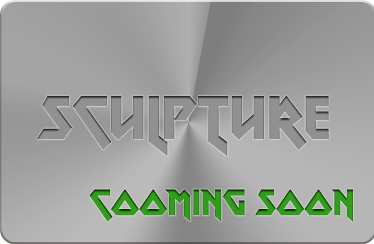
<style>
.page{position:relative;width:374px;height:244px}
.page>*{position:absolute;margin:0}
.t1{font:61.1px "MetalLord-Regular";color:#919191;text-transform:uppercase}
.t2{font:36.7px "MetalLord-Regular";color:#329d1d;text-transform:uppercase}
.t3{font:61.1px "MetalLord-Regular";color:#329d1d;text-transform:uppercase}
</style>
<div class="page">
<p class="t1" style="left:37px;top:95px;width:292px;height:61px">sculpture</p>
<p class="t2" style="left:89px;top:189px;width:264px;height:33px"><span class="t3"> </span>cooming soon</p>
</div>
